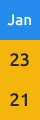
<style>
.page{position:relative;width:40px;height:120px;background:#f4b60d}
.page>*{position:absolute;margin:0}
.t1{font:15px "Ubuntu-Medium";color:#ffffff}
.t2{font:18px "Ubuntu-Medium";color:#2a2b2e}
</style>
<div class="page">
<p class="t1" style="left:7px;top:14px;width:24px;height:12px">Jan</p>
<p class="t2" style="left:10px;top:53px;width:19px;height:14px">23</p>
<p class="t2" style="left:10px;top:93px;width:17px;height:13px">21</p>
</div>
